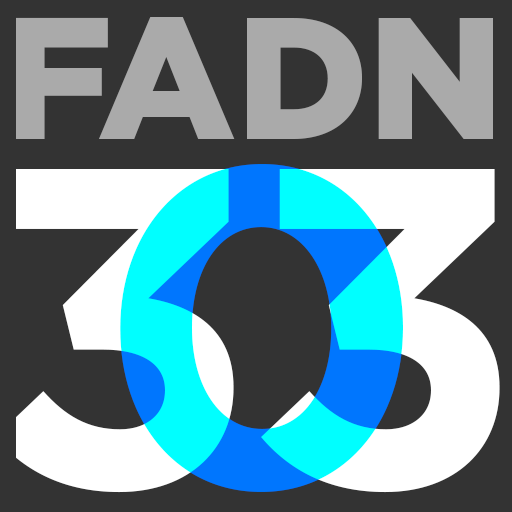
<style>
.page{position:relative;width:512px;height:512px;background:#333333}
.page>*{position:absolute;margin:0}
.t1{font:173px "Gotham-Black";color:#aaaaaa}
.t2{font:454px "Gotham-Bold"}
.t3{font:454px "Gotham-Bold";color:#ffffff}
</style>
<div class="page">
<p class="t1" style="left:11px;top:17px;width:482px;height:122px">FADN</p>
<p class="t2" style="left:120px;top:164px;width:283px;height:328px">0</p>
<p class="t3" style="left:261px;top:169px;width:239px;height:324px">3</p>
</div>
